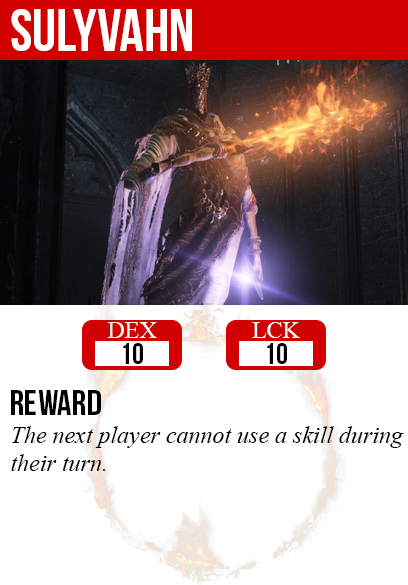
<style>
.page{position:relative;width:408px;height:585px;background:#ffffff}
.page>*{position:absolute;margin:0}
.t1{font:60px "BebasNeue";color:#ffffff}
.t2{font:24px "TimesNewRomanPSMT";color:#ffffff}
.t3{font:30px "BebasNeue";color:#000000}
.t4{font:36px "BebasNeue";color:#000000}
.t5{font:24px "TimesNewRomanPS-ItalicMT";color:#000000}
</style>
<div class="page">
<p class="t1" style="left:11px;top:9px;width:181px;height:42px">sulyvahn</p>
<p class="t2" style="left:107px;top:322px;width:50px;height:16px">DEX</p>
<p class="t2" style="left:252px;top:322px;width:48px;height:16px">LCK</p>
<p class="t3" style="left:123px;top:343px;width:20px;height:21px">10</p>
<p class="t3" style="left:267px;top:343px;width:20px;height:21px">10</p>
<p class="t4" style="left:11px;top:390px;width:90px;height:25px">reward</p>
<p class="t5" style="left:11px;top:426px;width:393px;height:45px">The next player cannot use a skill during<br>their turn.</p>
</div>
